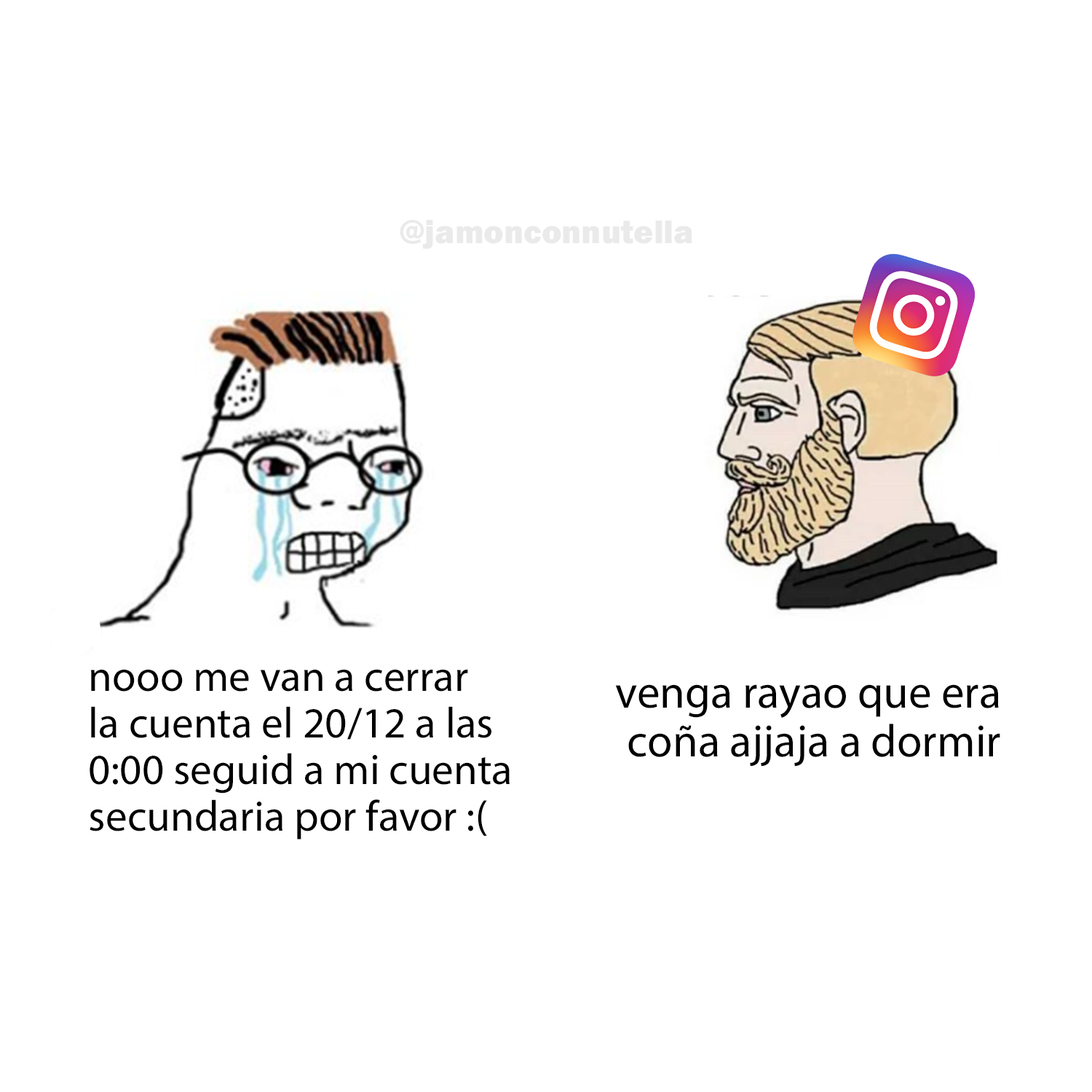
<style>
.page{position:relative;width:1092px;height:1092px;background:#ffffff}
.page>*{position:absolute;margin:0}
.t1{font:33.8px "FranklinGothic-Heavy";color:#eaeaea}
.t2{font:43.2px "MyriadPro-Regular";color:#000000}
.t3{font:45.8px "MyriadPro-Regular";color:#000000}
</style>
<div class="page">
<p class="t1" style="left:400px;top:220px;width:292px;height:29px">@jamonconnutella</p>
<p class="t2" style="left:90px;top:669px;width:420px;height:170px">nooo me van a cerrar<br>la cuenta el 20/12 a las<br>0:00 seguid a mi cuenta<br>secundaria por favor :(</p>
<p class="t3" style="left:615px;top:684px;width:385px;height:83px;text-align:right">venga rayao que era<br>coña ajjaja a dormir</p>
</div>
